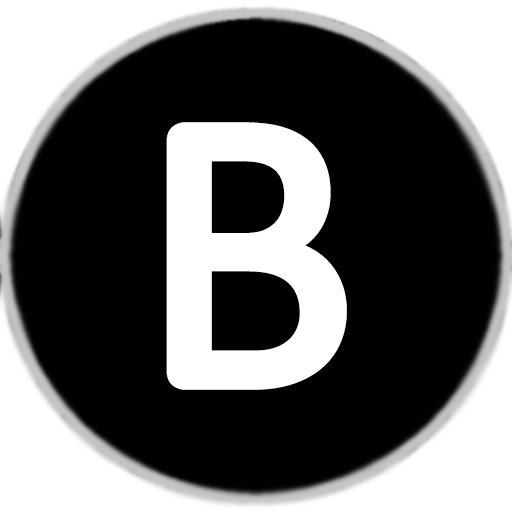
<style>
.page{position:relative;width:512px;height:512px;background:#010101}
.page>*{position:absolute;margin:0}
.t1{font:405.6px "Calibri";color:#ffffff;font-weight:bold}
</style>
<div class="page">
<p class="t1" style="left:166px;top:122px;width:181px;height:268px">B</p>
</div>
